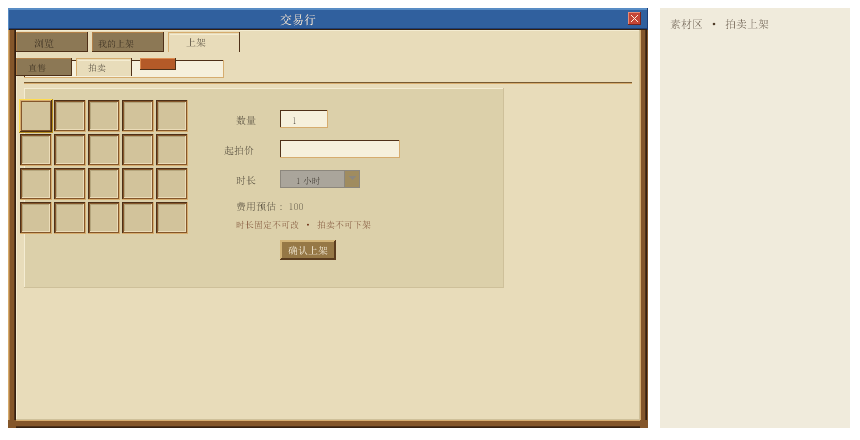
<style>
.page{position:relative;width:860px;height:440px;background:#e8dcba}
.page>*{position:absolute;margin:0}
.t1{font:12px "SimSun";color:#fff5dc}
.t2{font:11px "SimSun";color:#503c28}
.t3{font:10px "SimSun"}
.t4{font:9px "SimSun"}
.t5{font:9px "SimSun";color:#783c1e}
.t6{font:10px "SimSun";color:#fff5dc}
</style>
<div class="page">
<p class="t1" style="left:280px;top:14px;width:36px;height:12px">交易行</p>
<p class="t2" style="left:670px;top:19px;width:99px;height:11px">素材区 · 拍卖上架</p>
<p class="t3" style="left:34px;top:38px;width:20px;height:10px">浏览</p>
<p class="t4" style="left:98px;top:39px;width:36px;height:9px">我的上架</p>
<p class="t3" style="left:186px;top:38px;width:20px;height:9px">上架</p>
<p class="t4" style="left:28px;top:63px;width:18px;height:9px">直售</p>
<p class="t4" style="left:88px;top:63px;width:18px;height:9px">拍卖</p>
<p class="t3" style="left:236px;top:115px;width:20px;height:10px">数量</p>
<p class="t3" style="left:293px;top:117px;width:3px;height:7px">1</p>
<p class="t3" style="left:224px;top:145px;width:30px;height:10px">起拍价</p>
<p class="t3" style="left:236px;top:175px;width:20px;height:10px">时长</p>
<p class="t4" style="left:297px;top:176px;width:23px;height:9px">1小时</p>
<p class="t3" style="left:237px;top:201px;width:66px;height:10px">费用预估: 100</p>
<p class="t5" style="left:236px;top:220px;width:135px;height:9px">时长固定不可改 · 拍卖不可下架</p>
<p class="t6" style="left:288px;top:245px;width:40px;height:10px">确认上架</p>
</div>
